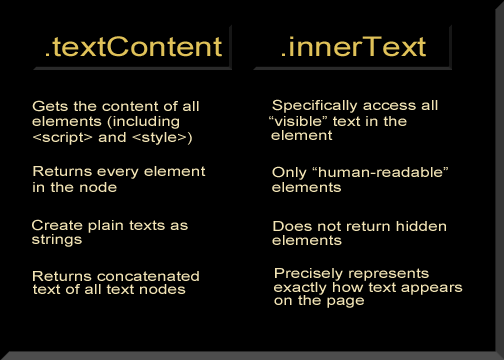
<style>
.page{position:relative;width:504px;height:360px;background:#000000}
.page>*{position:absolute;margin:0}
.t1{font:27px "ArialMT";color:#e0c259;scale:1.23 1}
.t2{font:14px "ArialMT";color:#f2e4b5;scale:1.23 1}
</style>
<div class="page">
<p class="t1" style="left:46px;top:36px;width:176px;height:21px">.textContent</p>
<p class="t1" style="left:282px;top:36px;width:144px;height:21px">.innerText</p>
<p class="t2" style="left:32px;top:100px;width:167px;height:12px">Gets the content of all</p>
<p class="t2" style="left:272px;top:99px;width:166px;height:14px">Specifically access all</p>
<p class="t2" style="left:32px;top:116px;width:147px;height:13px">elements (including</p>
<p class="t2" style="left:269px;top:116px;width:138px;height:10px">“visible” text in the</p>
<p class="t2" style="left:33px;top:132px;width:159px;height:13px">&lt;script&gt; and &lt;style&gt;)</p>
<p class="t2" style="left:271px;top:130px;width:62px;height:10px">element</p>
<p class="t2" style="left:33px;top:166px;width:173px;height:13px">Returns every element</p>
<p class="t2" style="left:272px;top:166px;width:176px;height:14px">Only “human-readable”</p>
<p class="t2" style="left:33px;top:182px;width:84px;height:10px">in the node</p>
<p class="t2" style="left:272px;top:182px;width:69px;height:10px">elements</p>
<p class="t2" style="left:32px;top:219px;width:156px;height:14px">Create plain texts as</p>
<p class="t2" style="left:273px;top:221px;width:173px;height:10px">Does not return hidden</p>
<p class="t2" style="left:32px;top:234px;width:50px;height:13px">strings</p>
<p class="t2" style="left:272px;top:235px;width:70px;height:10px">elements</p>
<p class="t2" style="left:275px;top:268px;width:154px;height:13px">Precisely represents</p>
<p class="t2" style="left:33px;top:271px;width:166px;height:10px">Returns concatenated</p>
<p class="t2" style="left:33px;top:284px;width:153px;height:10px">text of all text nodes</p>
<p class="t2" style="left:274px;top:282px;width:189px;height:13px">exactly how text appears</p>
<p class="t2" style="left:274px;top:295px;width:90px;height:13px">on the page</p>
</div>
